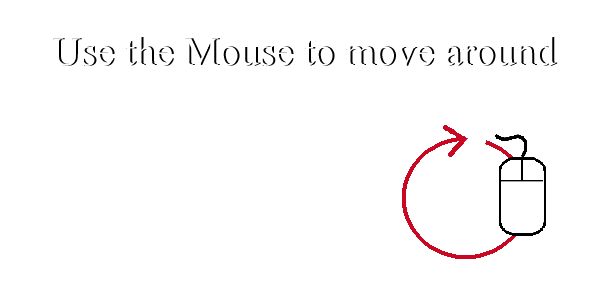
<style>
.page{position:relative;width:600px;height:300px;background:#ffffff}
.page>*{position:absolute;margin:0}
.t1{font:50px "Aparajita"}
</style>
<div class="page">
<p class="t1" style="left:53px;top:37px;width:505px;height:29px">Use the Mouse to move around</p>
</div>
